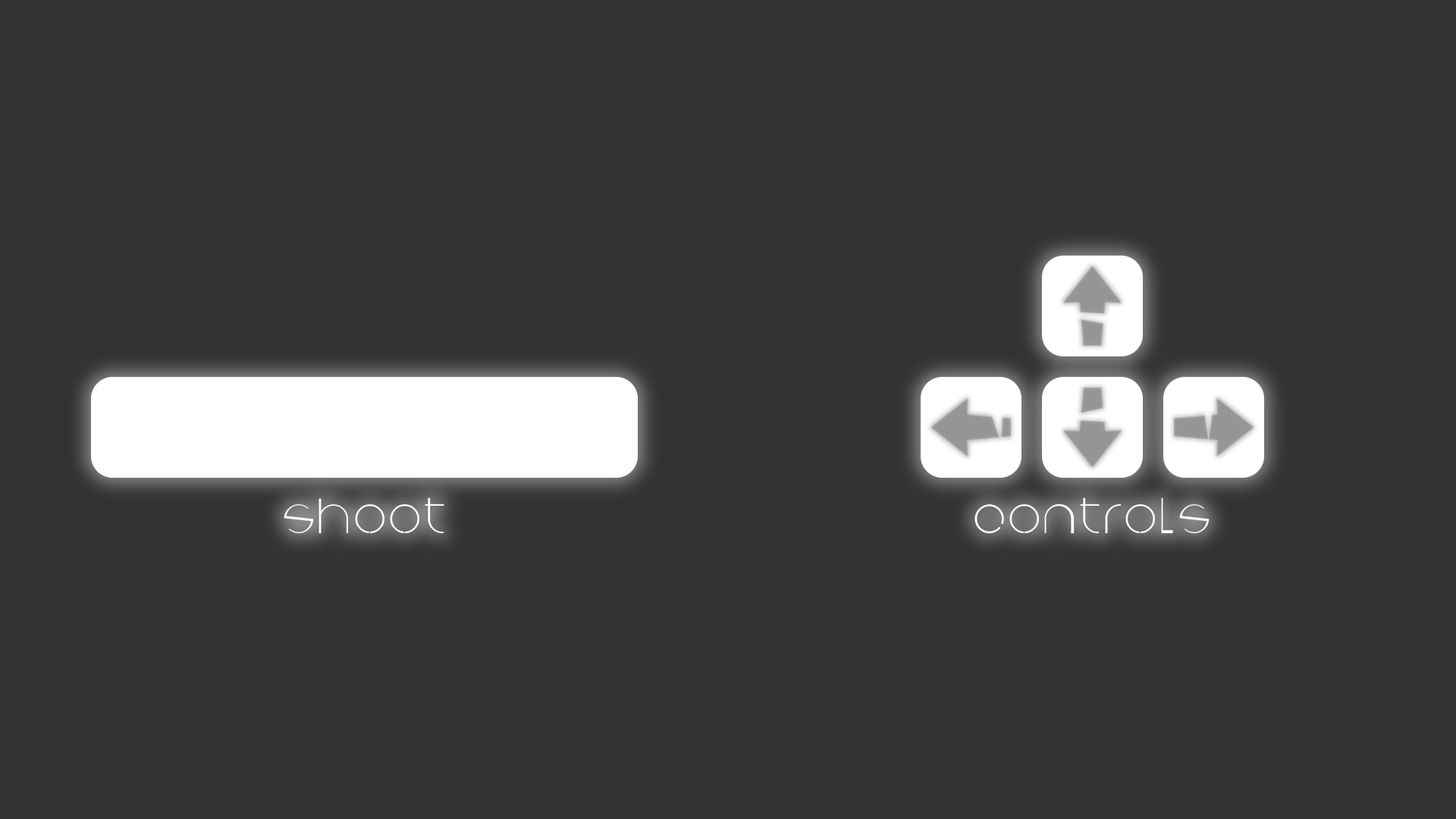
<style>
.page{position:relative;width:1456px;height:819px;background:#333333}
.page>*{position:absolute;margin:0}
.t1{font:57.5px "space1";color:#ffffff}
</style>
<div class="page">
<p class="t1" style="left:284px;top:497px;width:160px;height:37px">shoot</p>
<p class="t1" style="left:974px;top:497px;width:236px;height:37px">controls</p>
</div>
